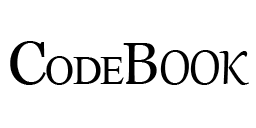
<style>
.page{position:relative;width:256px;height:128px;background:#ffffff}
.page>*{position:absolute;margin:0}
.t1{font:60px "Microsoft-Himalaya";letter-spacing:-0.025em;color:#000000}
.t2{font:60px "Georgia";letter-spacing:-0.025em;color:#000000}
.t3{font:60px "PalatinoLinotype-Roman";letter-spacing:-0.025em;color:#000000}
.t4{font:60px "Gabriola";letter-spacing:-0.025em;color:#000000}
</style>
<div class="page">
<p class="t1" style="left:10px;top:41px;width:239px;height:44px"><span class="t2">C</span>ODE<span class="t3">B</span><span class="t4">OOK</span></p>
</div>
